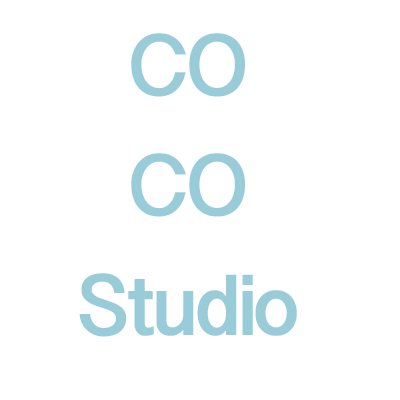
<style>
.page{position:relative;width:400px;height:400px;background:#ffffff}
.page>*{position:absolute;margin:0}
.t1{font:72px/60px "GujaratiSangamMN-Bold";letter-spacing:-0.05em;color:#98ccd9}
</style>
<div class="page">
<p class="t1" style="left:79px;top:33px;width:218px;height:304px;text-align:center">CO<br><br>CO<br><br>Studio</p>
</div>
